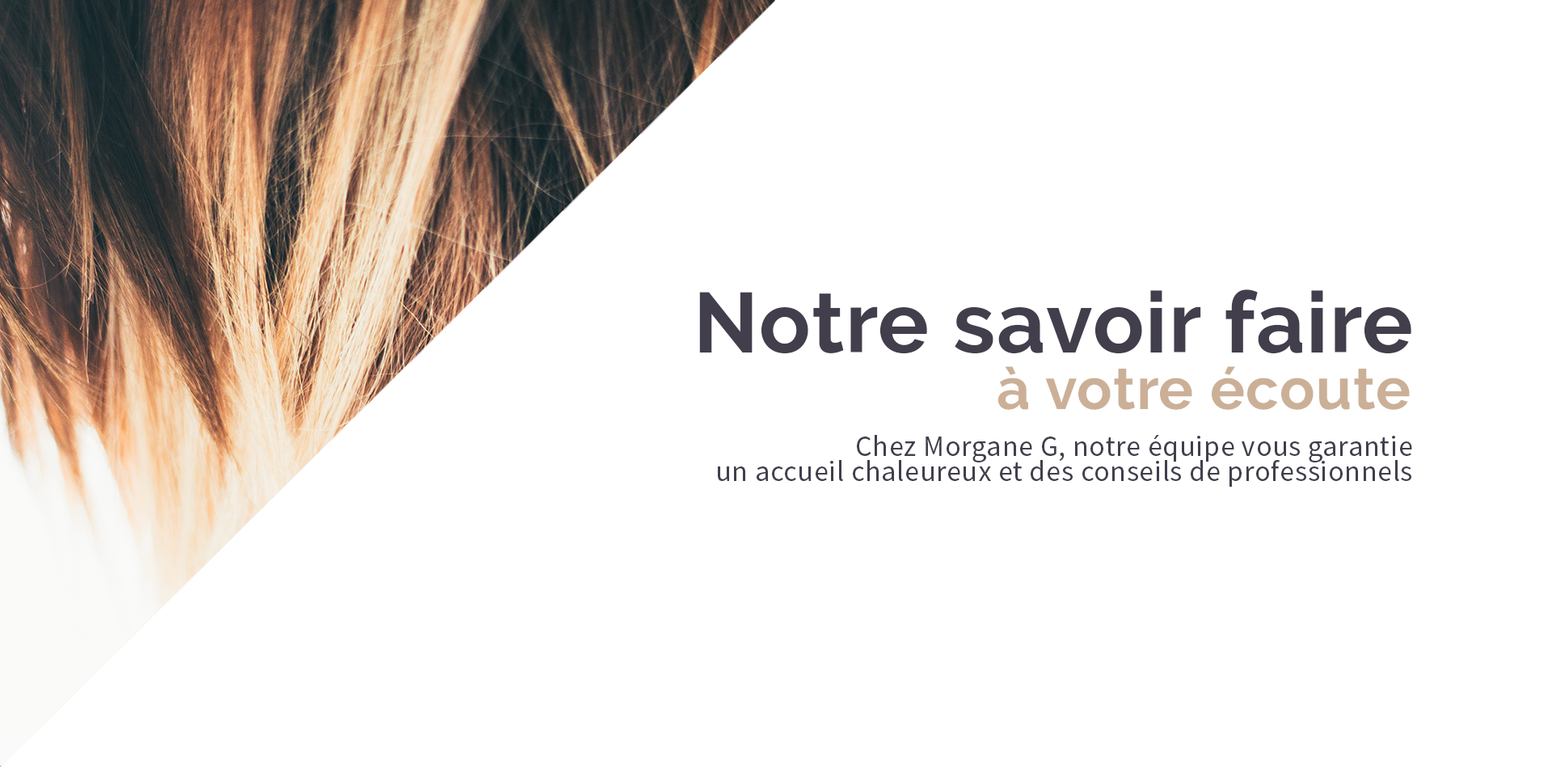
<style>
.page{position:relative;width:1552px;height:768px;background:#ffffff}
.page>*{position:absolute;margin:0}
.t1{font:84.9px "Raleway-Bold";letter-spacing:0.02em;color:#423e4c}
.t2{font:58.2px "Raleway-Bold";letter-spacing:0.02em;color:#cbb097}
.t3{font:29.1px/25.1px "SourceSansPro-Regular";letter-spacing:0.02em;color:#423e4c}
</style>
<div class="page">
<p class="t1" style="left:699px;top:289px;width:713px;height:65px">Notre savoir faire</p>
<p class="t2" style="left:998px;top:366px;width:412px;height:44px">à votre écoute</p>
<p class="t3" style="left:718px;top:435px;width:695px;height:52px;text-align:right">Chez Morgane G, notre équipe vous garantie<br>un accueil chaleureux et des conseils de professionnels</p>
</div>
